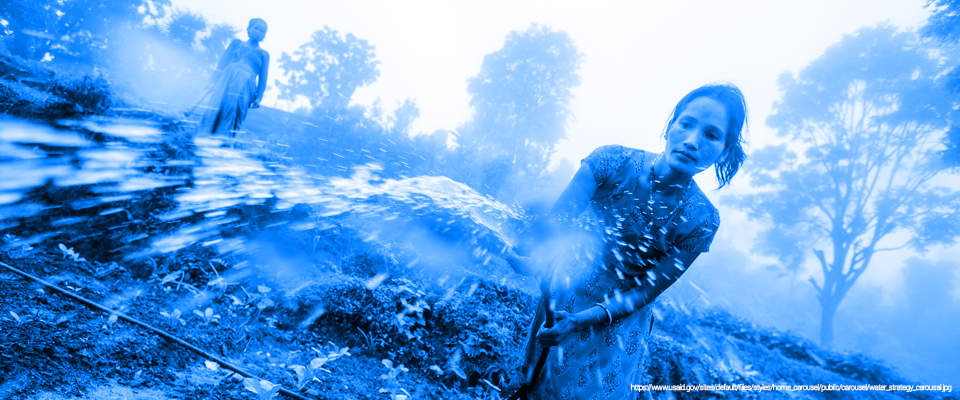
<style>
.page{position:relative;width:960px;height:400px}
.page>*{position:absolute;margin:0}
.t1{font:8px "Roboto-Light";letter-spacing:-0.075em;color:#ffffff}
</style>
<div class="page">
<p class="t1" style="left:631px;top:383px;width:321px;height:9px">https://www.usaid.gov/sites/default/files/styles/home_carousel/public/carousel/water_strategy_carousal.jpg</p>
</div>
